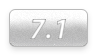
<style>
.page{position:relative;width:97px;height:56px;background:#ffffff}
.page>*{position:absolute;margin:0}
.t1{font:30px "MyriadPro-BoldIt";color:#efefef}
</style>
<div class="page">
<p class="t1" style="left:30px;top:19px;width:36px;height:20px">7.1</p>
</div>
